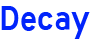
<style>
.page{position:relative;width:91px;height:46px;background:#ffffff}
.page>*{position:absolute;margin:0}
.t1{font:36px "HighwayGothic";color:#0124fb}
</style>
<div class="page">
<p class="t1" style="left:1px;top:6px;width:89px;height:33px">Decay</p>
</div>
